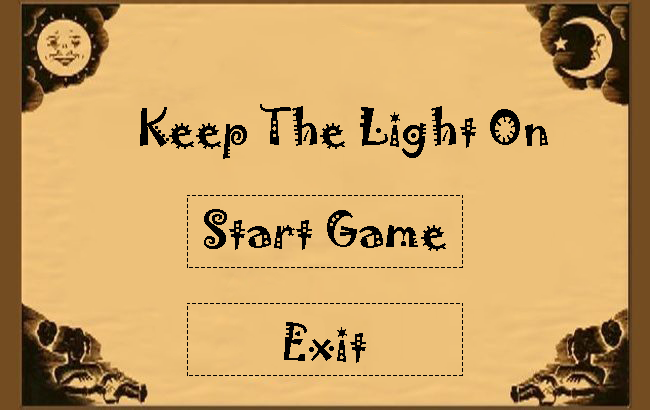
<style>
.page{position:relative;width:650px;height:410px;background:#edc17a}
.page>*{position:absolute;margin:0}
.t1{font:45px "Jokerman-Regular";color:#000000}
</style>
<div class="page">
<p class="t1" style="left:140px;top:104px;width:408px;height:55px">Keep The Light On</p>
<p class="t1" style="left:204px;top:209px;width:242px;height:42px">Start Game</p>
<p class="t1" style="left:284px;top:322px;width:82px;height:41px">Exit</p>
</div>
